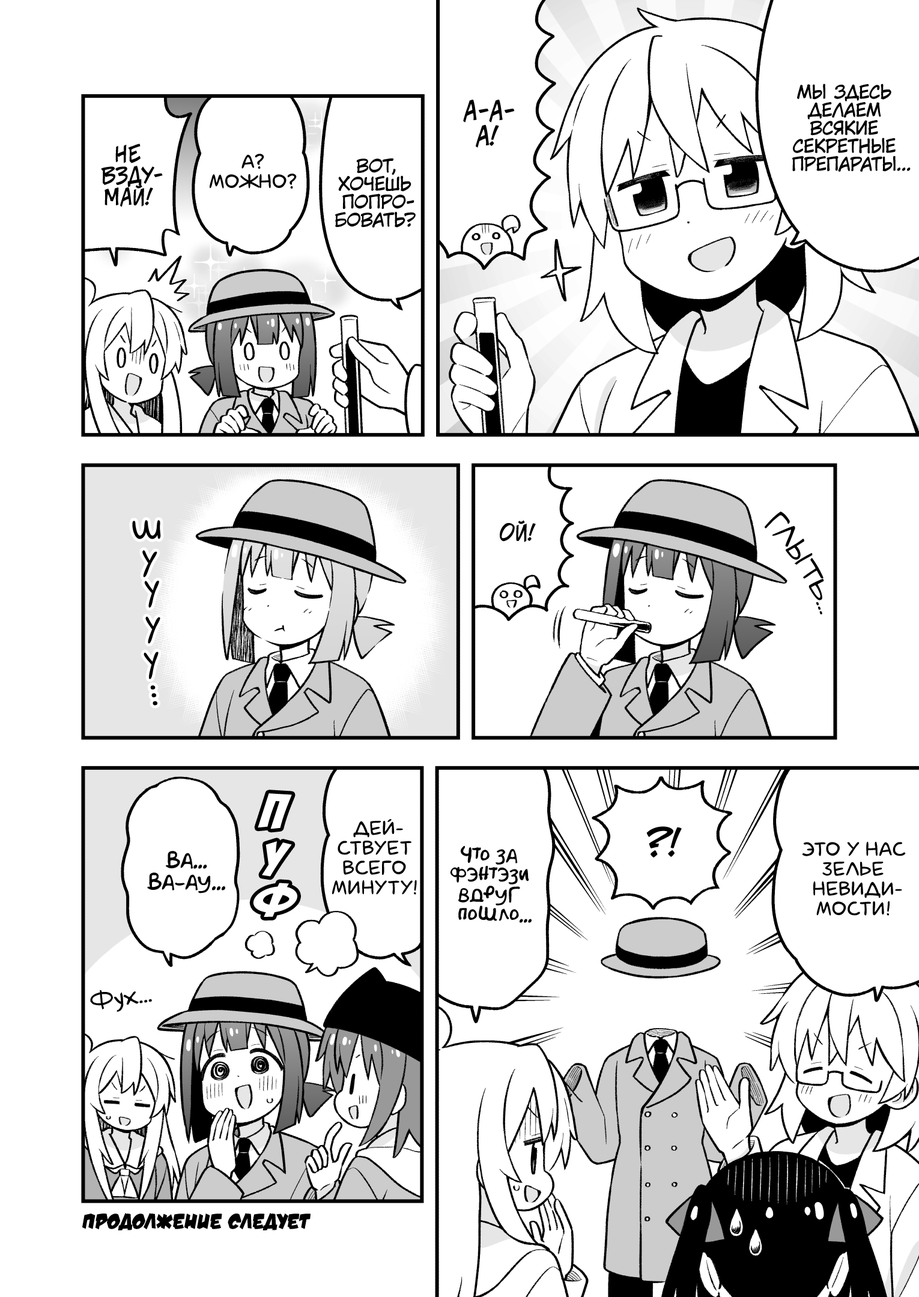
<style>
.page{position:relative;width:919px;height:1297px;background:#ffffff}
.page>*{position:absolute;margin:0}
.t1{font:18px "KuraiVoice2";color:#000000;text-transform:uppercase}
.t2{font:25.2px "v_CCJeffCampbell";color:#000000;text-transform:uppercase}
.t3{font:21.6px "v_CCJeffCampbell";color:#000000;text-transform:uppercase}
.t4{font:19.8px "laCartoonerie";color:#000000;text-transform:uppercase}
.t5{font:36px "laCartoonerie";color:#000000}
.t6{font:25.2px "v_Augie";color:#000000;text-transform:uppercase}
.t7{font:54.1px "BadaBoom";color:#ffffff;scale:1.1 1}
.t8{font:36px "v_CCJeffCampbell";color:#000000;text-transform:uppercase}
.t9{font:19.8px "AkbarPlain";color:#000000}
.t10{font:21.6px "AkbarPlain";color:#000000}
.t11{font:25.2px "v_Augie";color:#000000}
.t12{font:21.6px "v_DamnNoisyKids";color:#000000;text-transform:uppercase}
</style>
<div class="page">
<p class="t1" style="left:792px;top:83px;width:119px;height:89px;text-align:center">Мы здесь<br>делаем<br>всякие<br>секретные<br>препараты...</p>
<p class="t2" style="left:463px;top:100px;width:52px;height:48px;text-align:center">А-а-<br>а!</p>
<p class="t3" style="left:101px;top:144px;width:62px;height:63px;text-align:center">Не<br>взду-<br>май!</p>
<p class="t4" style="left:210px;top:154px;width:87px;height:35px;text-align:center">А?<br>Можно?</p>
<p class="t1" style="left:335px;top:158px;width:81px;height:70px;text-align:center">Вот,<br>хочешь<br>попро-<br>бовать?</p>
<p class="t5" style="left:132px;top:520px;width:29px;height:19px">ш</p>
<p class="t3" style="left:500px;top:520px;width:36px;height:22px">Ой!</p>
<p class="t6" style="left:765px;top:512px;width:59px;height:103px;rotate:59deg">глыть...</p>
<p class="t5" style="left:142px;top:550px;width:15px;height:28px;rotate:8deg">у</p>
<p class="t5" style="left:144px;top:581px;width:15px;height:27px">у</p>
<p class="t5" style="left:145px;top:617px;width:15px;height:27px;rotate:4deg">у</p>
<p class="t5" style="left:144px;top:652px;width:15px;height:27px;rotate:-2deg">у</p>
<p class="t5" style="left:150px;top:685px;width:7px;height:21px;rotate:82deg">...</p>
<p class="t7" style="left:258px;top:794px;width:34px;height:36px;rotate:7deg">п</p>
<p class="t4" style="left:332px;top:819px;width:85px;height:76px;text-align:center">Дей-<br>ствует<br>всего<br>минуту!</p>
<p class="t8" style="left:646px;top:827px;width:36px;height:31px">?!</p>
<p class="t7" style="left:262px;top:842px;width:30px;height:35px;rotate:5deg">у</p>
<p class="t9" style="left:450px;top:846px;width:82px;height:77px;text-align:center">Что за<br>фэнтэзи<br>вдруг<br>пошло...</p>
<p class="t4" style="left:803px;top:842px;width:103px;height:74px;text-align:center">Это у нас<br>зелье<br>невиди-<br>мости!</p>
<p class="t10" style="left:147px;top:851px;width:78px;height:43px;text-align:center">Ва...<br>Ва-ау...</p>
<p class="t7" style="left:253px;top:883px;width:44px;height:34px;rotate:13deg">ф</p>
<p class="t11" style="left:90px;top:991px;width:62px;height:21px;rotate:-9deg">Фух...</p>
<p class="t12" style="left:82px;top:1213px;width:229px;height:18px">Продолжение следует</p>
</div>
